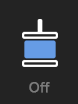
<style>
.page{position:relative;width:78px;height:104px;background:#232323}
.page>*{position:absolute;margin:0}
.t1{font:14px "SegoeUI";color:#7c7c7c;font-weight:bold}
</style>
<div class="page">
<p class="t1" style="left:29px;top:82px;width:21px;height:11px">Off</p>
</div>
